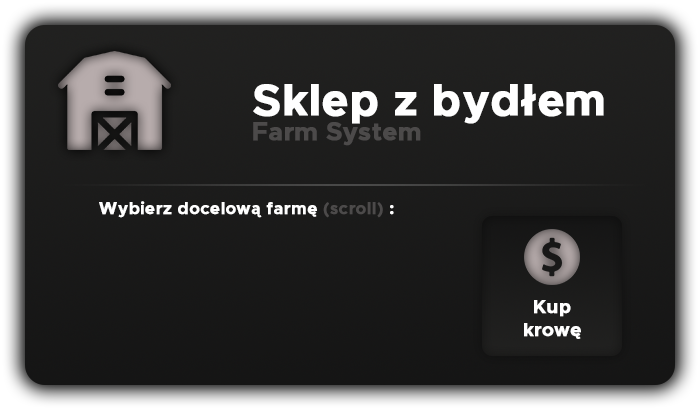
<style>
.page{position:relative;width:700px;height:410px}
.page>*{position:absolute;margin:0}
.t1{font:44.3px "Metropolis-Bold";color:#ffffff;font-weight:bold}
.t2{font:25.1px "Metropolis-Bold";color:#4c4a4a;font-weight:bold}
.t3{font:16.9px "Metropolis-Bold";color:#ffffff;font-weight:bold}
.t4{font:16.9px "Metropolis-Bold";color:#4c4a4a;font-weight:bold}
.t5{font:19px "Metropolis-Bold";color:#ffffff;font-weight:bold}
</style>
<div class="page">
<p class="t1" style="left:253px;top:84px;width:351px;height:40px">Sklep z bydłem</p>
<p class="t2" style="left:253px;top:122px;width:168px;height:24px">Farm System</p>
<p class="t3" style="left:99px;top:201px;width:295px;height:17px">Wybierz docelową farmę<span class="t4"> (scroll) </span>:</p>
<p class="t5" style="left:524px;top:300px;width:57px;height:39px;text-align:center">Kup<br>krowę</p>
</div>
